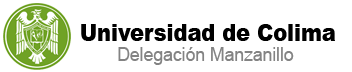
<style>
.page{position:relative;width:352px;height:72px;background:#ffffff}
.page>*{position:absolute;margin:0}
.t1{font:23.5px "Arial-Black";color:#000000;scale:0.89 1}
.t2{font:19px "ArialMT";color:#838383;scale:0.92 1}
</style>
<div class="page">
<p class="t1" style="left:81px;top:24px;width:254px;height:17px">Universidad de Colima</p>
<p class="t2" style="left:118px;top:47px;width:176px;height:18px">Delegación Manzanillo</p>
</div>
